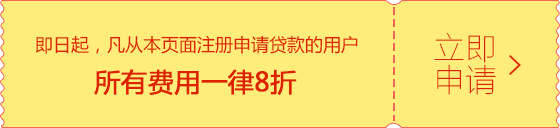
<style>
.page{position:relative;width:560px;height:128px;background:#ffed7b}
.page>*{position:absolute;margin:0}
.t1{font:18px "MicrosoftYaHei";color:#dd2200}
.t2{font:32px/32px "FZLTCXHJW--GB1-0";color:#dd2200}
.t3{font:26px "MicrosoftYaHei";color:#dd2200;font-weight:bold}
</style>
<div class="page">
<p class="t1" style="left:36px;top:35px;width:322px;height:19px">即日起，凡从本页面注册申请贷款的用户</p>
<p class="t2" style="left:434px;top:32px;width:62px;height:63px;text-align:center">立即<br>申请</p>
<p class="t3" style="left:94px;top:69px;width:203px;height:26px">所有费用一律8折</p>
</div>
